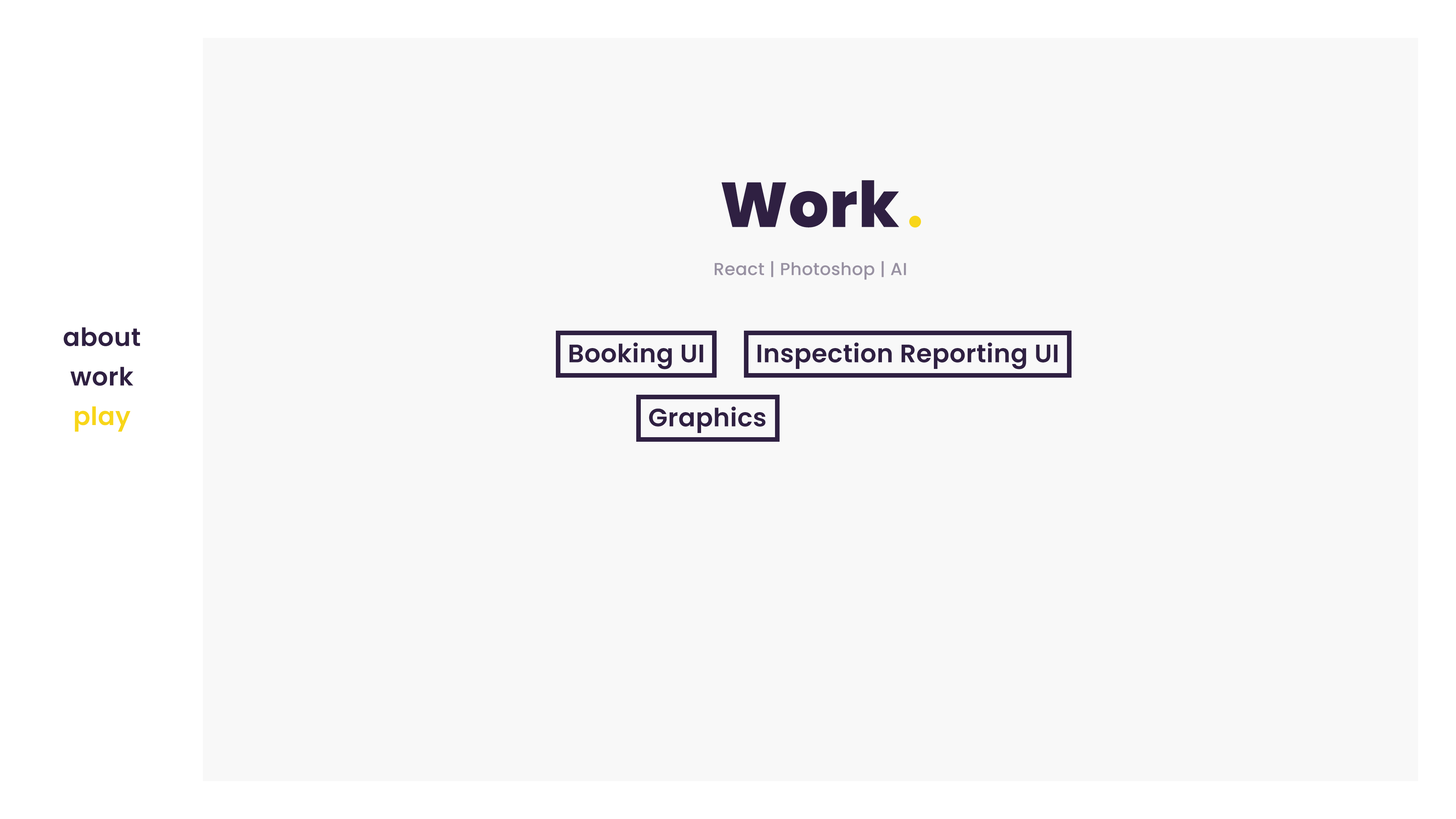
<style>
.page{position:relative;width:1456px;height:819px;background:#f8f8f8}
.page>*{position:absolute;margin:0}
.t1{font:63.2px "Poppins-ExtraBold";letter-spacing:0.01em;color:#2f2042}
.t2{font:17.4px "Poppins-Medium";letter-spacing:0.01em;color:#9891a2}
.t3{font:25.3px/39.5px "Poppins-SemiBold";letter-spacing:0.01em;color:#2f2042}
.t4{font:25.3px/39.5px "Poppins-SemiBold";letter-spacing:0.01em;color:#f8d619}
.t5{font:25.3px "Poppins-SemiBold";letter-spacing:0.01em;color:#2f2042}
</style>
<div class="page">
<p class="t1" style="left:722px;top:180px;width:177px;height:47px">Work</p>
<p class="t2" style="left:715px;top:261px;width:191px;height:19px">React | Photoshop | AI</p>
<p class="t3" style="left:64px;top:327px;width:76px;height:105px;text-align:center">about<br>work<br><span class="t4">play</span></p>
<p class="t5" style="left:570px;top:342px;width:133px;height:27px">Booking UI</p>
<p class="t5" style="left:758px;top:342px;width:299px;height:27px">Inspection Reporting UI</p>
<p class="t5" style="left:649px;top:406px;width:117px;height:27px">Graphics</p>
</div>
